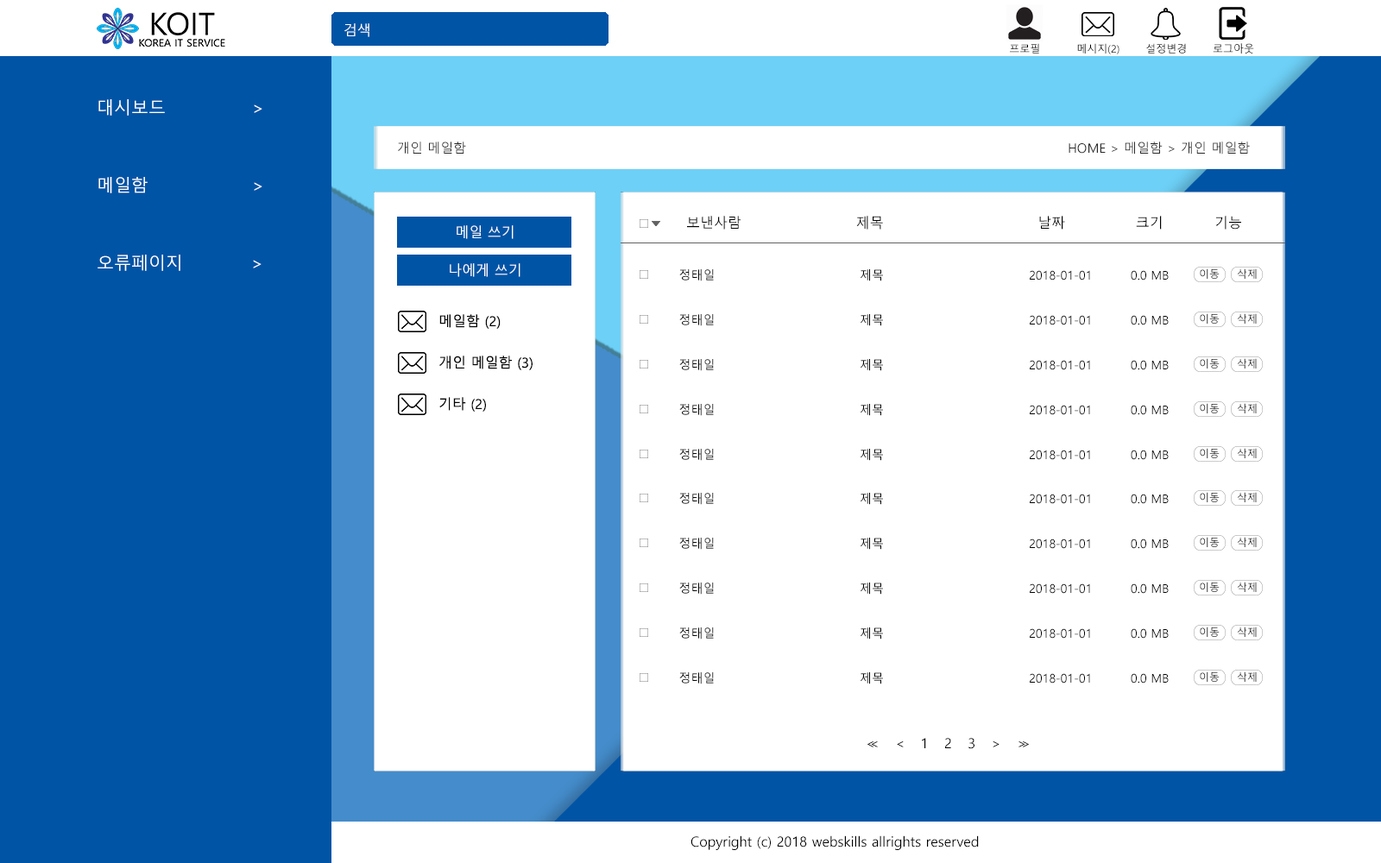
<style>
.page{position:relative;width:1381px;height:863px;background:#ffffff}
.page>*{position:absolute;margin:0}
.t1{font:13.8px "MalgunGothic";color:#ffffff}
.t2{font:10.4px "MalgunGothic";color:#000000}
.t3{font:10.7px "MalgunGothic";scale:0.97 1}
.t4{font:17.3px/77.7px "MalgunGothic";color:#ffffff}
.t5{font:13px "MalgunGothic";color:#282828}
.t6{font:13.8px "MalgunGothic";color:#000000}
.t7{font:12.1px "MalgunGothic";color:#000000}
.t8{font:10.4px "MalgunGothic"}
.t9{font:13.8px "MalgunGothic";letter-spacing:0.4em;color:#000000}
.t10{font:13.8px "MalgunGothic";letter-spacing:-0.4em;color:#000000}
</style>
<div class="page">
<p class="t1" style="left:344px;top:23px;width:25px;height:14px">검색</p>
<p class="t2" style="left:1010px;top:43px;width:29px;height:11px">프로필</p>
<p class="t2" style="left:1077px;top:43px;width:43px;height:11px">메시지(2)</p>
<p class="t2" style="left:1146px;top:43px;width:40px;height:11px">설정변경</p>
<p class="t3" style="left:1213px;top:43px;width:41px;height:11px">로그아웃</p>
<p class="t4" style="left:98px;top:99px;width:164px;height:172px">대시보드   &gt;<br>메일함    &gt;<br>오류페이지       &gt;</p>
<p class="t5" style="left:398px;top:142px;width:68px;height:13px">개인 메일함</p>
<p class="t5" style="left:1069px;top:142px;width:181px;height:13px">HOME &gt; 메일함 &gt; 개인 메일함</p>
<p class="t6" style="left:687px;top:216px;width:554px;height:14px">보낸사람        제목       날짜     크기  기능</p>
<p class="t1" style="left:457px;top:225px;width:57px;height:14px">메일 쓰기</p>
<p class="t1" style="left:450px;top:263px;width:71px;height:14px">나에게 쓰기</p>
<p class="t7" style="left:679px;top:269px;width:490px;height:12px">정태일           제목        2018-01-01      0.0 MB</p>
<p class="t8" style="left:1200px;top:268px;width:20px;height:11px">이동</p>
<p class="t2" style="left:1237px;top:268px;width:20px;height:11px">삭제</p>
<p class="t6" style="left:439px;top:314px;width:62px;height:15px">메일함 (2)</p>
<p class="t7" style="left:679px;top:314px;width:490px;height:12px">정태일           제목        2018-01-01      0.0 MB</p>
<p class="t8" style="left:1200px;top:313px;width:20px;height:11px">이동</p>
<p class="t2" style="left:1237px;top:313px;width:20px;height:11px">삭제</p>
<p class="t6" style="left:439px;top:356px;width:94px;height:14px">개인 메일함 (3)</p>
<p class="t7" style="left:679px;top:359px;width:490px;height:12px">정태일           제목        2018-01-01      0.0 MB</p>
<p class="t8" style="left:1200px;top:358px;width:20px;height:11px">이동</p>
<p class="t2" style="left:1237px;top:358px;width:20px;height:11px">삭제</p>
<p class="t6" style="left:439px;top:397px;width:47px;height:15px">기타 (2)</p>
<p class="t7" style="left:679px;top:404px;width:490px;height:12px">정태일           제목        2018-01-01      0.0 MB</p>
<p class="t8" style="left:1200px;top:403px;width:20px;height:11px">이동</p>
<p class="t2" style="left:1237px;top:403px;width:20px;height:11px">삭제</p>
<p class="t7" style="left:679px;top:449px;width:490px;height:12px">정태일           제목        2018-01-01      0.0 MB</p>
<p class="t8" style="left:1200px;top:448px;width:20px;height:10px">이동</p>
<p class="t2" style="left:1237px;top:448px;width:20px;height:10px">삭제</p>
<p class="t7" style="left:679px;top:493px;width:490px;height:12px">정태일           제목        2018-01-01      0.0 MB</p>
<p class="t8" style="left:1200px;top:492px;width:20px;height:10px">이동</p>
<p class="t2" style="left:1237px;top:492px;width:20px;height:10px">삭제</p>
<p class="t7" style="left:679px;top:538px;width:490px;height:12px">정태일           제목        2018-01-01      0.0 MB</p>
<p class="t8" style="left:1200px;top:537px;width:20px;height:10px">이동</p>
<p class="t2" style="left:1237px;top:537px;width:20px;height:10px">삭제</p>
<p class="t8" style="left:1200px;top:582px;width:20px;height:10px">이동</p>
<p class="t2" style="left:1237px;top:582px;width:20px;height:10px">삭제</p>
<p class="t7" style="left:679px;top:583px;width:490px;height:12px">정태일           제목        2018-01-01      0.0 MB</p>
<p class="t7" style="left:679px;top:628px;width:490px;height:12px">정태일           제목        2018-01-01      0.0 MB</p>
<p class="t8" style="left:1200px;top:627px;width:20px;height:10px">이동</p>
<p class="t2" style="left:1237px;top:627px;width:20px;height:10px">삭제</p>
<p class="t7" style="left:679px;top:673px;width:490px;height:12px">정태일           제목        2018-01-01      0.0 MB</p>
<p class="t8" style="left:1200px;top:672px;width:20px;height:10px">이동</p>
<p class="t2" style="left:1237px;top:672px;width:20px;height:10px">삭제</p>
<p class="t9" style="left:868px;top:738px;width:161px;height:11px"><span class="t10">&lt;</span>&lt; &lt; 1 2 3 &gt; <span class="t10">&gt;</span>&gt;</p>
<p class="t6" style="left:691px;top:836px;width:288px;height:14px">Copyright (c) 2018 webskills allrights reserved</p>
</div>
